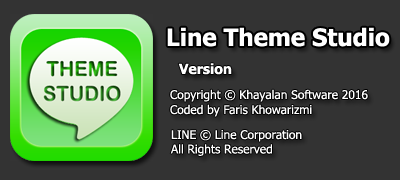
<style>
.page{position:relative;width:400px;height:180px;background:#333333}
.page>*{position:absolute;margin:0}
.t1{font:24px "Tahoma-Bold";color:#ffffff}
.t2{font:14px "Tahoma-Bold";color:#ffffff}
.t3{font:12px "Tahoma";color:#ffffff}
</style>
<div class="page">
<p class="t1" style="left:167px;top:27px;width:223px;height:20px">Line Theme Studio</p>
<p class="t2" style="left:178px;top:63px;width:54px;height:12px">Version</p>
<p class="t3" style="left:170px;top:89px;width:198px;height:13px">Copyright © Khayalan Software 2016</p>
<p class="t3" style="left:170px;top:104px;width:142px;height:13px">Coded by Faris Khowarizmi</p>
<p class="t3" style="left:170px;top:130px;width:132px;height:26px">LINE © Line Corporation<br>All Rights Reserved</p>
</div>
